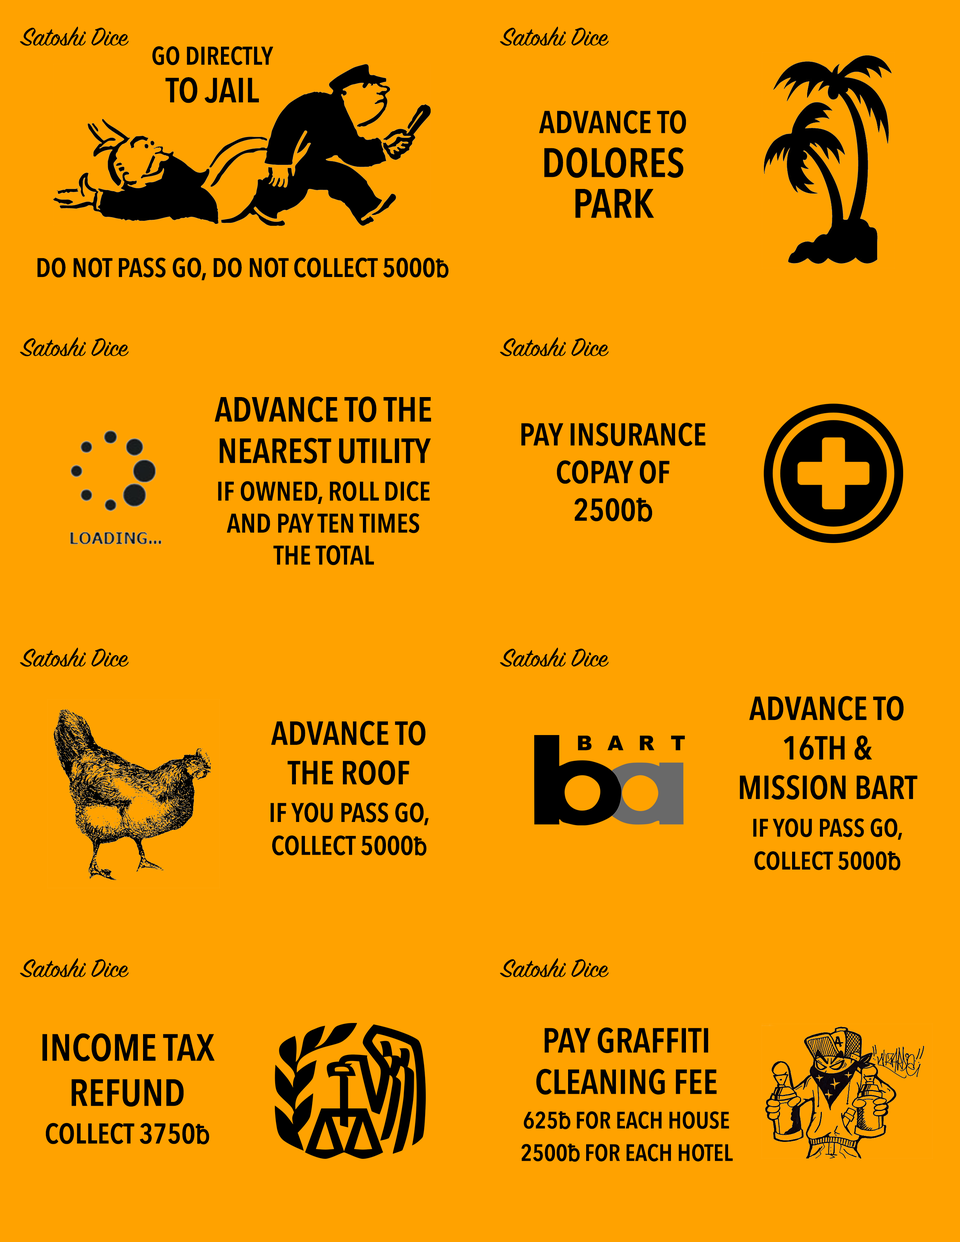
<style>
.page{position:relative;width:960px;height:1242px;background:#ffa200}
.page>*{position:absolute;margin:0}
.t1{font:28.2px "SignPainter-HouseScript";color:#000000}
.t2{font:25.3px "AvenirNextCondensed-DemiBold";color:#000000;text-transform:uppercase}
.t3{font:34.5px/37.6px "AvenirNextCondensed-DemiBold";color:#000000;text-transform:uppercase}
.t4{font:31.4px/40.8px "AvenirNextCondensed-DemiBold";color:#000000;text-transform:uppercase}
.t5{font:40.8px/43.9px "AvenirNextCondensed-DemiBold";color:#000000;text-transform:uppercase}
.t6{font:40.8px/40.8px "AvenirNextCondensed-DemiBold";color:#000000;text-transform:uppercase}
.t7{font:26.7px "AvenirNextCondensed-DemiBold";color:#000000;text-transform:uppercase}
.t8{font:25.1px "Helvetica";color:#000000;text-transform:uppercase;font-weight:bold;scale:0.9 1}
.t9{font:34.5px "AvenirNextCondensed-DemiBold";color:#000000;text-transform:uppercase}
.t10{font:26.7px/37.6px "AvenirNextCondensed-DemiBold";color:#000000;text-transform:uppercase}
.t11{font:31.4px "AvenirNextCondensed-DemiBold";color:#000000;text-transform:uppercase}
.t12{font:31.4px "Helvetica";color:#000000;text-transform:uppercase;font-weight:bold;scale:0.9 1}
.t13{font:32.9px "AvenirNextCondensed-DemiBold";color:#000000;text-transform:uppercase}
.t14{font:25.1px/37.6px "AvenirNextCondensed-DemiBold";color:#000000;text-transform:uppercase}
.t15{font:25.1px/32.9px "AvenirNextCondensed-DemiBold";color:#000000;text-transform:uppercase}
.t16{font:25.1px/32.9px "Helvetica";color:#000000;text-transform:uppercase;font-weight:bold;scale:0.9 1}
.t17{font:26.7px/32.9px "AvenirNextCondensed-DemiBold";color:#000000;text-transform:uppercase}
.t18{font:37.6px "AvenirNextCondensed-DemiBold";color:#000000;text-transform:uppercase}
.t19{font:28.2px/37.6px "AvenirNextCondensed-DemiBold";color:#000000;text-transform:uppercase}
.t20{font:26.7px/37.6px "Helvetica";color:#000000;text-transform:uppercase;font-weight:bold;scale:0.9 1}
.t21{font:23.5px/34.5px "AvenirNextCondensed-DemiBold";color:#000000;text-transform:uppercase}
.t22{font:23.5px/34.5px "Helvetica";color:#000000;text-transform:uppercase;font-weight:bold;scale:0.9 1}
.t23{font:23.5px "AvenirNextCondensed-DemiBold";color:#000000;text-transform:uppercase}
.t24{font:23.5px/32.5px "Helvetica";color:#000000;text-transform:uppercase;font-weight:bold;scale:0.9 1}
</style>
<div class="page">
<p class="t1" style="left:20px;top:26px;width:109px;height:20px">Satoshi Dice</p>
<p class="t1" style="left:500px;top:26px;width:109px;height:20px">Satoshi Dice</p>
<p class="t2" style="left:152px;top:46px;width:121px;height:57px;text-align:center">go directly<br><span class="t3">to jail</span></p>
<p class="t4" style="left:539px;top:110px;width:147px;height:108px;text-align:center">Advance to <span class="t5">dolores</span><span class="t6"> park</span></p>
<p class="t7" style="left:37px;top:257px;width:412px;height:23px">do not pass go, do not collect 5000<span class="t8">ƀ</span></p>
<p class="t1" style="left:20px;top:337px;width:109px;height:19px">Satoshi Dice</p>
<p class="t1" style="left:500px;top:337px;width:109px;height:19px">Satoshi Dice</p>
<p class="t9" style="left:215px;top:396px;width:216px;height:169px;text-align:center">Advance to the nearest utility<br><span class="t10">If owned, roll dice</span><span class="t7"> and pay ten times the total</span></p>
<p class="t11" style="left:521px;top:423px;width:184px;height:99px;text-align:center">Pay insurance copay of 2500<span class="t12">ƀ</span></p>
<p class="t1" style="left:20px;top:647px;width:109px;height:20px">Satoshi Dice</p>
<p class="t1" style="left:500px;top:647px;width:109px;height:20px">Satoshi Dice</p>
<p class="t13" style="left:740px;top:696px;width:177px;height:175px;text-align:center">Advance to 16th &amp;<br>Mission BART<br><span class="t14">If you pass GO,<br></span><span class="t15">collect 5000</span><span class="t16">ƀ</span></p>
<p class="t13" style="left:270px;top:721px;width:159px;height:135px;text-align:center">Advance to The Roof<br><span class="t10">If you pass GO, </span><span class="t17">collect 5000</span><span class="t16">ƀ</span></p>
<p class="t1" style="left:20px;top:958px;width:109px;height:20px">Satoshi Dice</p>
<p class="t1" style="left:500px;top:958px;width:109px;height:20px">Satoshi Dice</p>
<p class="t18" style="left:42px;top:1033px;width:173px;height:112px;text-align:center">Income tax refund<br><span class="t19">collect 3750</span><span class="t20">ƀ</span></p>
<p class="t9" style="left:521px;top:1028px;width:212px;height:134px;text-align:center">Pay graffiti cleaning fee<br><span class="t21">625</span><span class="t22">ƀ </span><span class="t21">for each house<br></span><span class="t23">2500</span><span class="t24">ƀ </span><span class="t23">for each hotel</span></p>
</div>
